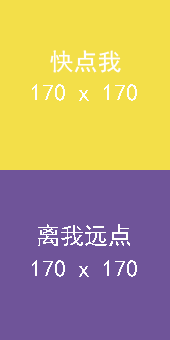
<style>
.page{position:relative;width:170px;height:340px;background:#6f5499}
.page>*{position:absolute;margin:0}
.t1{font:24px "SimHei";color:#ffffff}
</style>
<div class="page">
<p class="t1" style="left:50px;top:50px;width:71px;height:23px">快点我</p>
<p class="t1" style="left:32px;top:84px;width:105px;height:17px">170 x 170</p>
<p class="t1" style="left:38px;top:224px;width:92px;height:22px">离我远点</p>
<p class="t1" style="left:32px;top:260px;width:105px;height:17px">170 x 170</p>
</div>
